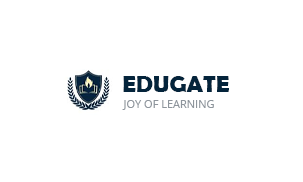
<style>
.page{position:relative;width:303px;height:182px;background:#ffffff}
.page>*{position:absolute;margin:0}
.t1{font:24px "BerlinSansFBDemi-Bold";color:#04243b;text-transform:uppercase}
.t2{font:11px "OpenSans";color:#8e959c;text-transform:uppercase}
</style>
<div class="page">
<p class="t1" style="left:123px;top:76px;width:106px;height:16px">Edugate</p>
<p class="t2" style="left:122px;top:100px;width:92px;height:10px">joy of learning</p>
</div>
